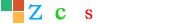
<style>
.page{position:relative;width:178px;height:24px;background:#ffffff}
.page>*{position:absolute;margin:0}
.t1{font:22px "STFangsong";color:#07a6f8;font-weight:bold}
.t2{font:24px "CTFangSongSJ";color:#18d00f;font-weight:bold}
.t3{font:18px "ç»å¸æ å®ç®-regular";color:#ff0000;font-weight:bold}
</style>
<div class="page">
<p class="t1" style="left:28px;top:4px;width:15px;height:16px">Z</p>
<p class="t2" style="left:55px;top:8px;width:11px;height:12px">c</p>
<p class="t3" style="left:85px;top:9px;width:8px;height:10px">s</p>
</div>
